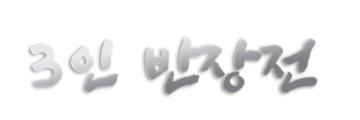
<style>
.page{position:relative;width:360px;height:120px;background:#ffffff}
.page>*{position:absolute;margin:0}
.t1{font:65.6px "SangSangRockOTF";letter-spacing:0.12em}
.t2{font:65.6px "SangSangRockOTF";letter-spacing:-0.02em}
</style>
<div class="page">
<p class="t1" style="left:31px;top:37px;width:286px;height:57px">3인 <span class="t2">반장</span>전</p>
</div>
